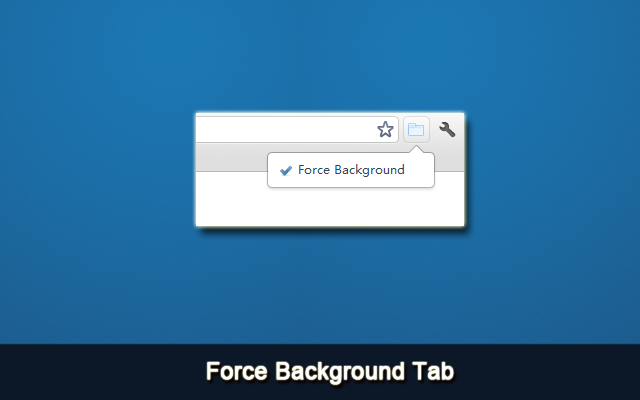
<style>
.page{position:relative;width:640px;height:400px}
.page>*{position:absolute;margin:0}
.t1{font:23.2px "ArialMT";color:#ffffff;font-weight:bold}
</style>
<div class="page">
<p class="t1" style="left:207px;top:362px;width:247px;height:23px">Force Background Tab</p>
</div>
